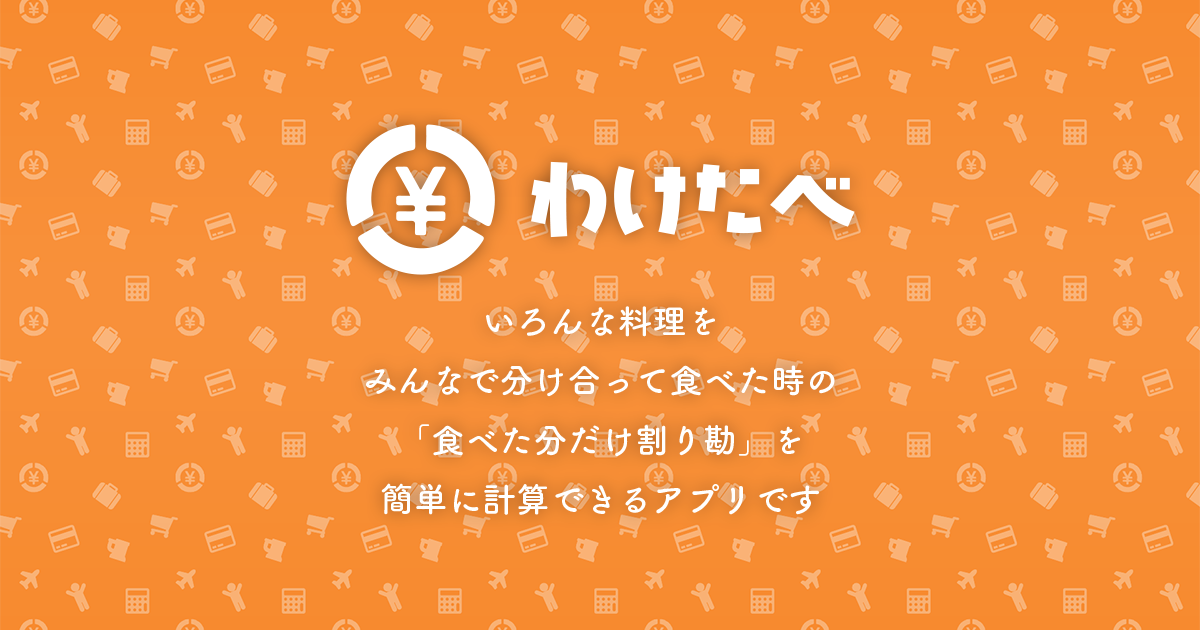
<style>
.page{position:relative;width:1200px;height:630px}
.page>*{position:absolute;margin:0}
.t1{font:34px "TsukuBRdGothicStd-B";color:#ffffff}
</style>
<div class="page">
<p class="t1" style="left:366px;top:306px;width:469px;height:209px;text-align:center">いろんな料理を<br>みんなで分け合って食べた時の<br>「食べた分だけ割り勘」を<br>簡単に計算できるアプリです</p>
</div>
